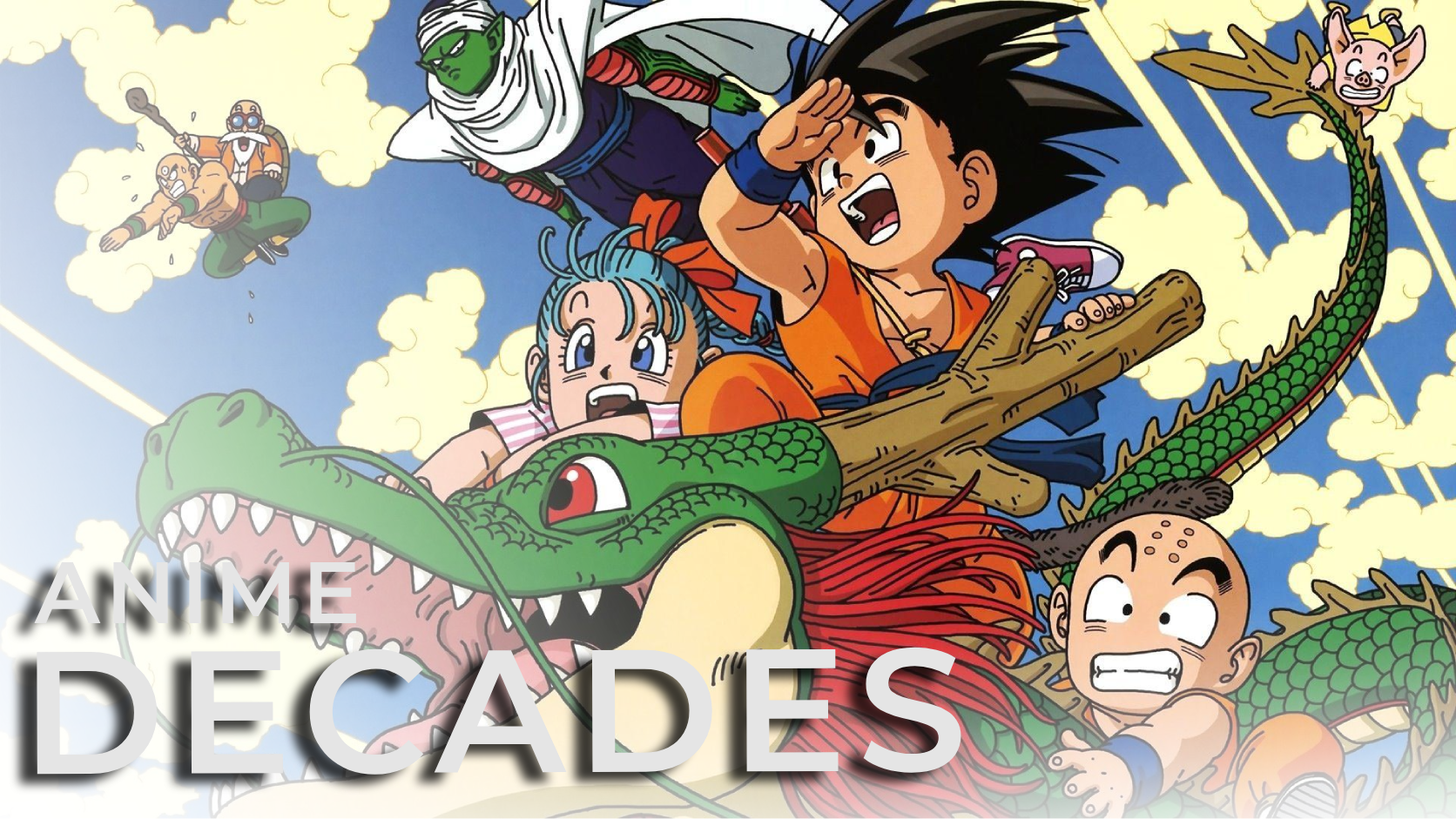
<style>
.page{position:relative;width:1456px;height:819px}
.page>*{position:absolute;margin:0}
.t1{font:87.1px "Montserrat-SemiBold";letter-spacing:0.06em;color:#e5e5e5}
.t2{font:174.1px "Montserrat-SemiBold";letter-spacing:0.06em;color:#e5e5e5}
</style>
<div class="page">
<p class="t1" style="left:34px;top:562px;width:322px;height:61px">ANIME</p>
<p class="t2" style="left:37px;top:647px;width:924px;height:128px">DECADES</p>
</div>
